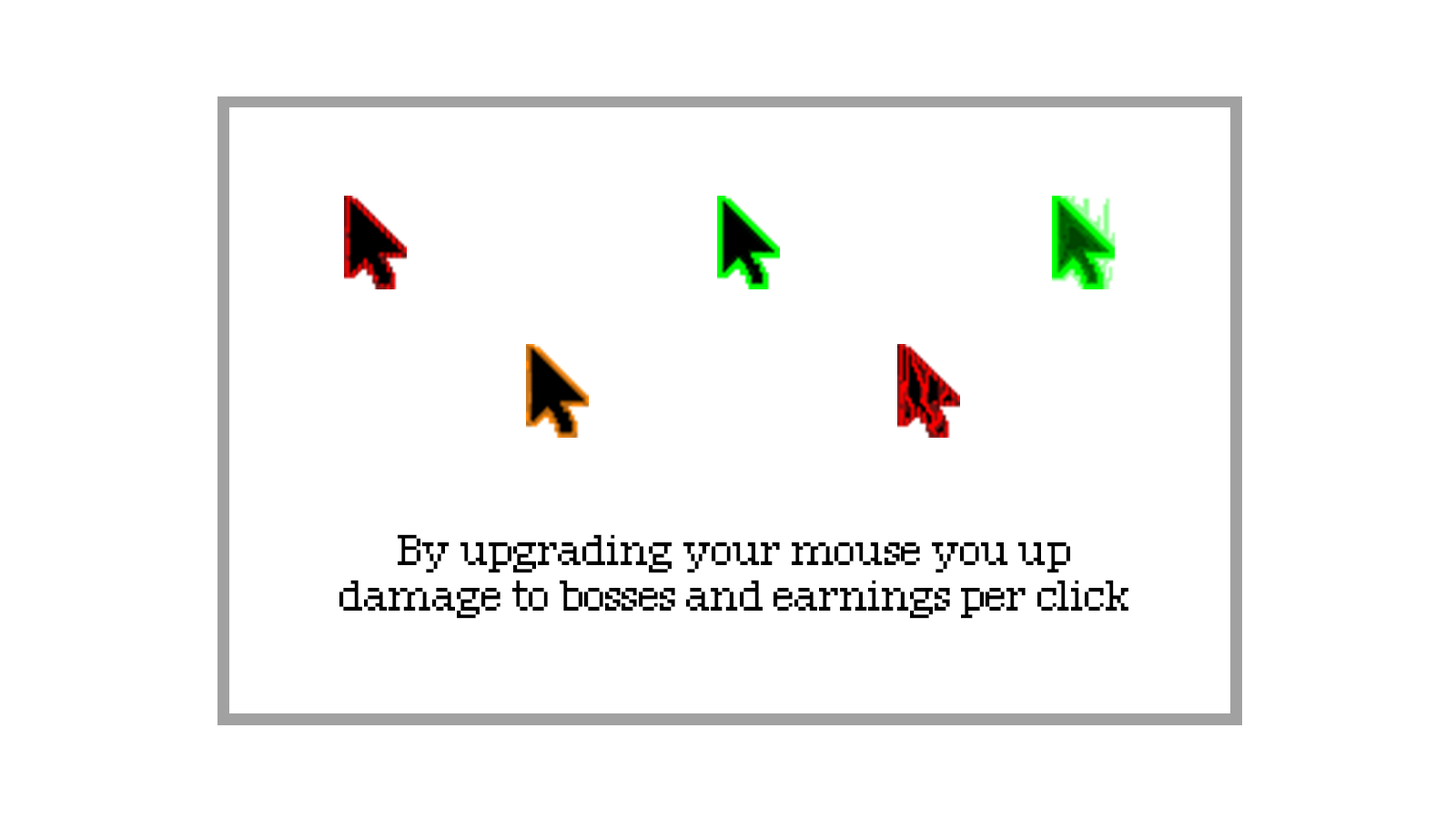
<style>
.page{position:relative;width:1456px;height:819px;background:#ffffff}
.page>*{position:absolute;margin:0}
.t1{font:37.9px "PixelGeorgia";letter-spacing:-0.05em;color:#000000}
</style>
<div class="page">
<p class="t1" style="left:339px;top:534px;width:789px;height:85px;text-align:center">By upgrading your mouse you up<br>damage to bosses and earnings per click</p>
</div>
